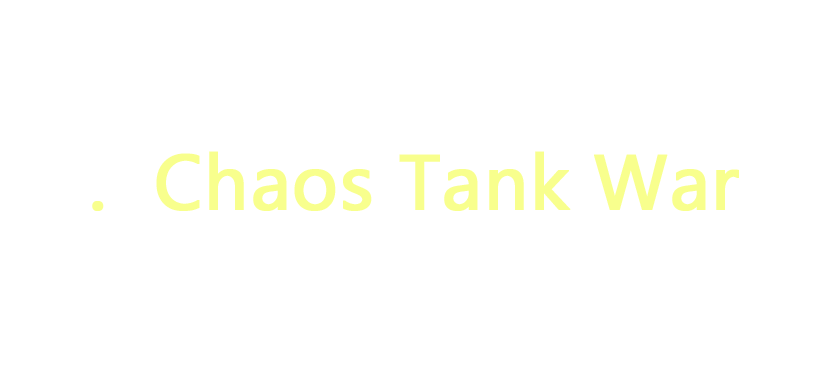
<style>
.page{position:relative;width:840px;height:370px;background:#ffffff}
.page>*{position:absolute;margin:0}
.t1{font:72px "MicrosoftYaHei";color:#f8ff8d;font-weight:bold}
</style>
<div class="page">
<p class="t1" style="left:92px;top:151px;width:647px;height:60px">.  Chaos Tank War</p>
</div>
